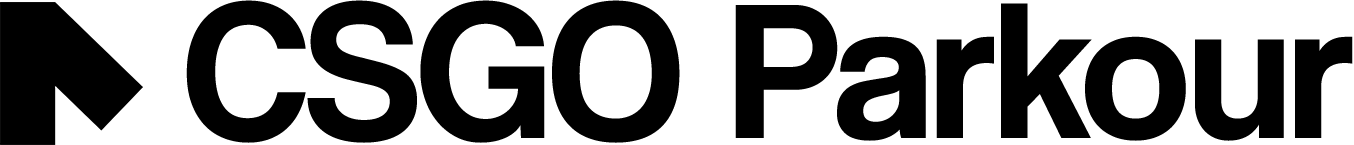
<style>
.page{position:relative;width:1354px;height:145px;background:#ffffff}
.page>*{position:absolute;margin:0}
.t1{font:200px "CoolveticaRg-Regular";color:#000000}
</style>
<div class="page">
<p class="t1" style="left:186px;top:0px;width:1167px;height:143px">CSGO Parkour</p>
</div>
